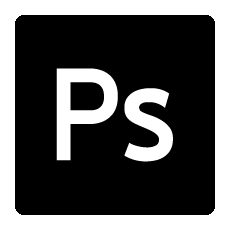
<style>
.page{position:relative;width:230px;height:230px;background:#000000}
.page>*{position:absolute;margin:0}
.t1{font:127.5px "BlueHighway-Regular";color:#ffffff}
</style>
<div class="page">
<p class="t1" style="left:56px;top:68px;width:117px;height:94px">Ps</p>
</div>
